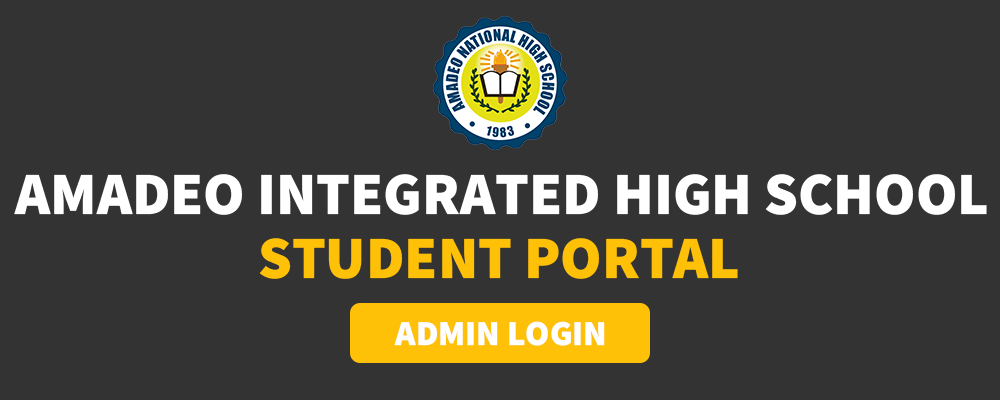
<style>
.page{position:relative;width:1000px;height:400px;background:#333333}
.page>*{position:absolute;margin:0}
.t1{font:60px "SourceSansRoman-Black";color:#ffffff}
.t2{font:60px "SourceSansRoman-Black";color:#ffc107}
.t3{font:35px "SourceSansRoman-Black";color:#ffffff}
</style>
<div class="page">
<p class="t1" style="left:14px;top:174px;width:973px;height:41px">AMADEO INTEGRATED HIGH SCHOOL</p>
<p class="t2" style="left:259px;top:238px;width:479px;height:41px">STUDENT PORTAL</p>
<p class="t3" style="left:394px;top:321px;width:211px;height:25px">ADMIN LOGIN</p>
</div>
